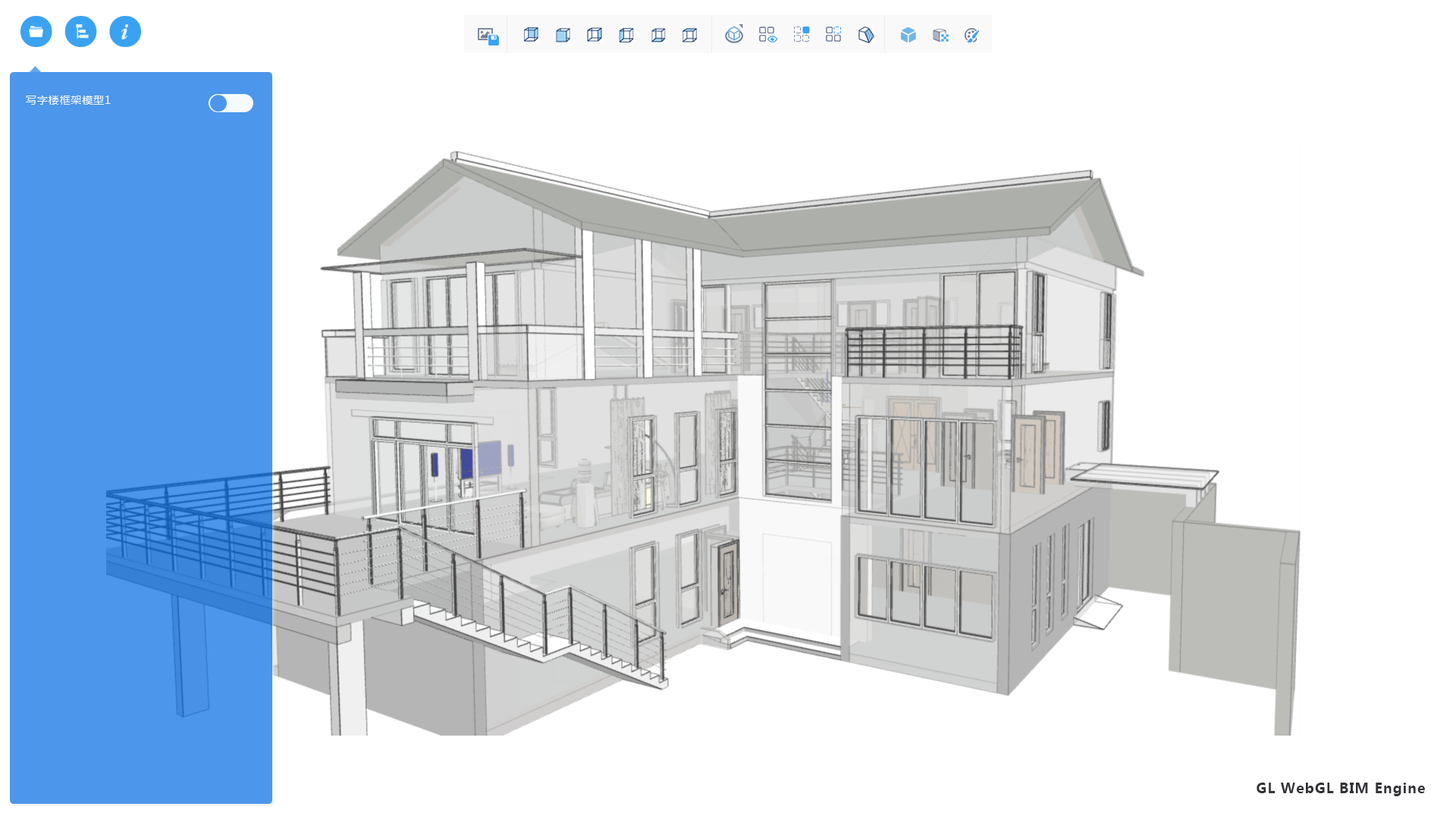
<style>
.page{position:relative;width:1456px;height:819px;background:#ffffff}
.page>*{position:absolute;margin:0}
.t1{font:10.6px "MicrosoftYaHei";letter-spacing:0.06em;color:#f4f9ff}
.t2{font:13.6px "MicrosoftYaHei-Bold";letter-spacing:0.06em;color:#313235}
</style>
<div class="page">
<p class="t1" style="left:26px;top:96px;width:85px;height:9px">写字楼框架模型1</p>
<p class="t2" style="left:1257px;top:783px;width:168px;height:13px">GL WebGL BIM Engine</p>
</div>
